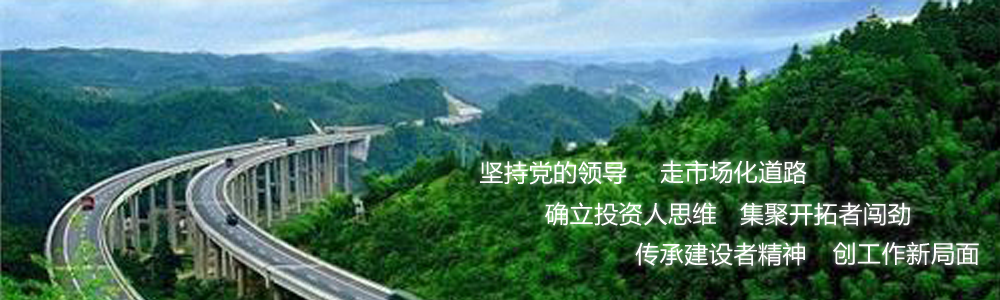
<style>
.page{position:relative;width:1000px;height:300px}
.page>*{position:absolute;margin:0}
.t1{font:24px "MicrosoftYaHei";letter-spacing:0.025em;color:#ffffff}
</style>
<div class="page">
<p class="t1" style="left:480px;top:161px;width:147px;height:24px">坚持党的领导</p>
<p class="t1" style="left:660px;top:160px;width:147px;height:24px">走市场化道路</p>
<p class="t1" style="left:545px;top:202px;width:171px;height:24px">确立投资人思维</p>
<p class="t1" style="left:740px;top:202px;width:170px;height:24px">集聚开拓者闯劲</p>
<p class="t1" style="left:635px;top:242px;width:170px;height:24px">传承建设者精神</p>
<p class="t1" style="left:833px;top:241px;width:146px;height:24px">创工作新局面</p>
</div>
